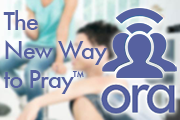
<style>
.page{position:relative;width:180px;height:120px}
.page>*{position:absolute;margin:0}
.t1{font:24px "Futura-Medium";letter-spacing:-0.05em;color:#5661a0}
.t2{font:14.4px "Futura-Medium";letter-spacing:-0.05em;color:#5661a0}
</style>
<div class="page">
<p class="t1" style="left:3px;top:10px;width:105px;height:84px">The<br>New Way<br>to Pray<span class="t2">™</span></p>
</div>
